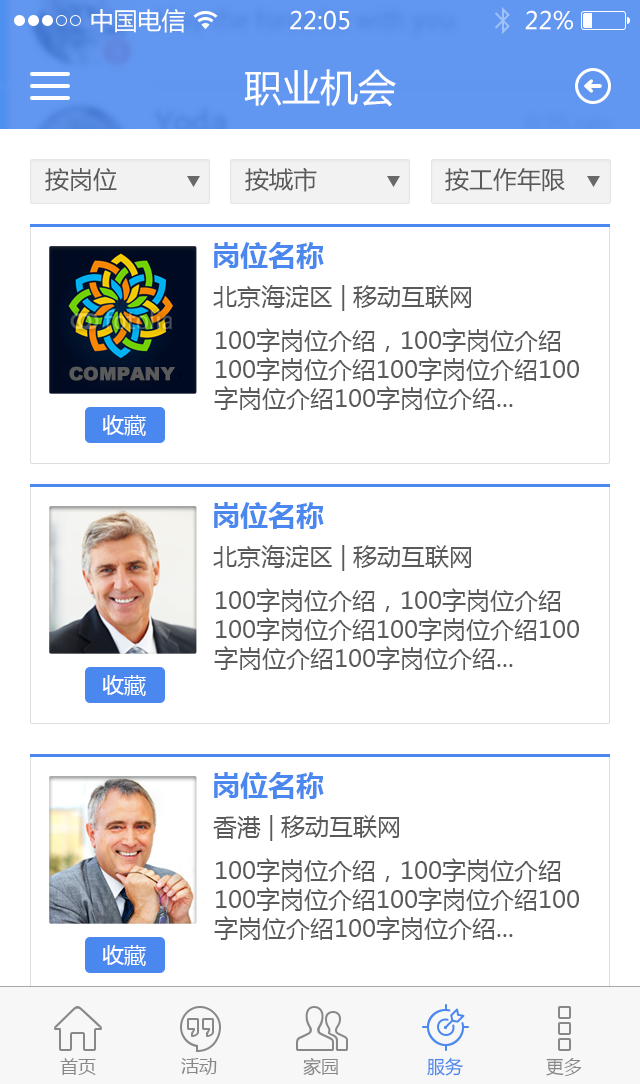
<style>
.page{position:relative;width:640px;height:1084px;background:#ffffff}
.page>*{position:absolute;margin:0}
.t1{font:24px "MicrosoftYaHei";color:#ffffff}
.t2{font:38px "MicrosoftYaHei";color:#ffffff}
.t3{font:24px "MicrosoftYaHei";color:#5a5a5a}
.t4{font:28px "MicrosoftYaHei-Bold";color:#4a87ee}
.t5{font:22px "MicrosoftYaHei";color:#fefeff}
.t6{font:18px "MicrosoftYaHei";color:#888888}
.t7{font:18px "MicrosoftYaHei";color:#4a87ee}
</style>
<div class="page">
<p class="t1" style="left:91px;top:9px;width:94px;height:24px">中国电信</p>
<p class="t1" style="left:290px;top:10px;width:60px;height:20px">22:05</p>
<p class="t1" style="left:525px;top:10px;width:48px;height:20px">22%</p>
<p class="t2" style="left:244px;top:69px;width:152px;height:38px">职业机会</p>
<p class="t3" style="left:45px;top:168px;width:72px;height:24px">按岗位</p>
<p class="t3" style="left:245px;top:167px;width:72px;height:25px">按城市</p>
<p class="t3" style="left:445px;top:168px;width:120px;height:24px">按工作年限</p>
<p class="t4" style="left:214px;top:242px;width:110px;height:27px">岗位名称</p>
<p class="t3" style="left:213px;top:285px;width:258px;height:26px">北京海淀区 | 移动互联网</p>
<p class="t3" style="left:214px;top:328px;width:365px;height:82px">100字岗位介绍，100字岗位介绍100字岗位介绍100字岗位介绍100字岗位介绍100字岗位介绍...</p>
<p class="t5" style="left:102px;top:415px;width:44px;height:21px">收藏</p>
<p class="t4" style="left:214px;top:502px;width:110px;height:27px">岗位名称</p>
<p class="t3" style="left:213px;top:545px;width:258px;height:26px">北京海淀区 | 移动互联网</p>
<p class="t3" style="left:214px;top:588px;width:365px;height:82px">100字岗位介绍，100字岗位介绍100字岗位介绍100字岗位介绍100字岗位介绍100字岗位介绍...</p>
<p class="t5" style="left:102px;top:675px;width:44px;height:21px">收藏</p>
<p class="t4" style="left:214px;top:772px;width:110px;height:27px">岗位名称</p>
<p class="t3" style="left:213px;top:815px;width:186px;height:26px">香港 | 移动互联网</p>
<p class="t3" style="left:214px;top:858px;width:365px;height:82px">100字岗位介绍，100字岗位介绍100字岗位介绍100字岗位介绍100字岗位介绍100字岗位介绍...</p>
<p class="t5" style="left:102px;top:945px;width:44px;height:21px">收藏</p>
<p class="t6" style="left:60px;top:1058px;width:36px;height:17px">首页</p>
<p class="t6" style="left:181px;top:1058px;width:36px;height:17px">活动</p>
<p class="t6" style="left:303px;top:1057px;width:35px;height:19px">家园</p>
<p class="t7" style="left:427px;top:1057px;width:36px;height:19px">服务</p>
<p class="t6" style="left:546px;top:1058px;width:35px;height:18px">更多</p>
</div>
